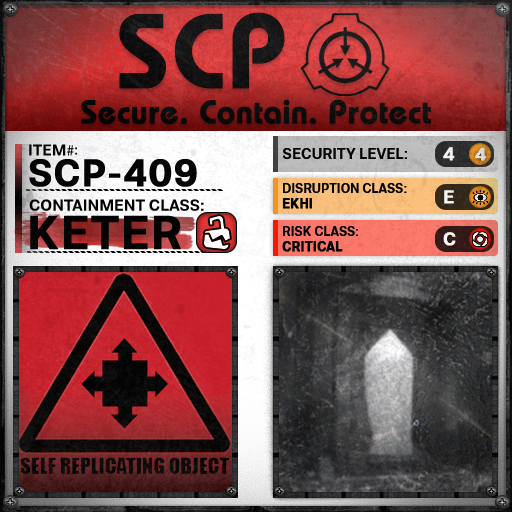
<style>
.page{position:relative;width:512px;height:512px}
.page>*{position:absolute;margin:0}
.t1{font:105.8px "BauhausLT-Demi";color:#000000;font-weight:bold}
.t2{font:33px "BauhausLT-Demi";color:#000000;font-weight:bold}
.t3{font:15.7px "Molde-Semibold";color:#000000}
.t4{font:15.7px "MyriadPro-Regular";color:#000000}
.t5{font:13.7px "Molde-Semibold";color:#000000}
.t6{font:15px "Molde-Semibold";color:#000000}
.t7{font:18.6px "Molde-Semibold";color:#ffffff;font-weight:bold}
.t8{font:17.8px "Molde-Semibold";color:#dadada;font-weight:bold}
.t9{font:38.2px "Molde-Semibold";color:#000000;font-weight:bold}
.t10{font:12.8px "Molde-Semibold";color:#000000}
.t11{font:12.8px "Molde-Semibold";color:#000000;font-weight:bold}
.t12{font:15.9px "Molde-Semibold";color:#000000}
.t13{font:47.2px "Molde-Semibold";color:#000000;font-weight:bold}
</style>
<div class="page">
<p class="t1" style="left:119px;top:12px;width:166px;height:77px">SCP</p>
<p class="t2" style="left:81px;top:99px;width:350px;height:26px">Secure. Contain. Protect</p>
<p class="t3" style="left:29px;top:144px;width:45px;height:12px">ITEM<span class="t4">#</span></p>
<p class="t5" style="left:75px;top:147px;width:2px;height:8px">:</p>
<p class="t6" style="left:283px;top:148px;width:124px;height:11px">SECURITY LEVEL:</p>
<p class="t7" style="left:443px;top:147px;width:12px;height:14px">4</p>
<p class="t8" style="left:475px;top:147px;width:11px;height:14px">4</p>
<p class="t9" style="left:29px;top:159px;width:168px;height:28px">SCP-409</p>
<p class="t10" style="left:282px;top:183px;width:125px;height:26px">DISRUPTION CLASS:<br><span class="t11">EKHI</span></p>
<p class="t7" style="left:444px;top:190px;width:10px;height:14px">E</p>
<p class="t12" style="left:29px;top:199px;width:175px;height:12px">CONTAINMENT CLASS:</p>
<p class="t13" style="left:30px;top:215px;width:151px;height:35px">KETER</p>
<p class="t10" style="left:282px;top:226px;width:76px;height:26px">RISK CLASS:<br><span class="t11">CRITICAL</span></p>
<p class="t7" style="left:443px;top:232px;width:13px;height:14px">C</p>
</div>
